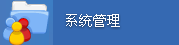
<style>
.page{position:relative;width:179px;height:45px;background:#3569b2}
.page>*{position:absolute;margin:0}
.t1{font:14px "SimSun";color:#ffffff}
</style>
<div class="page">
<p class="t1" style="left:66px;top:14px;width:54px;height:13px">系统管理</p>
</div>
